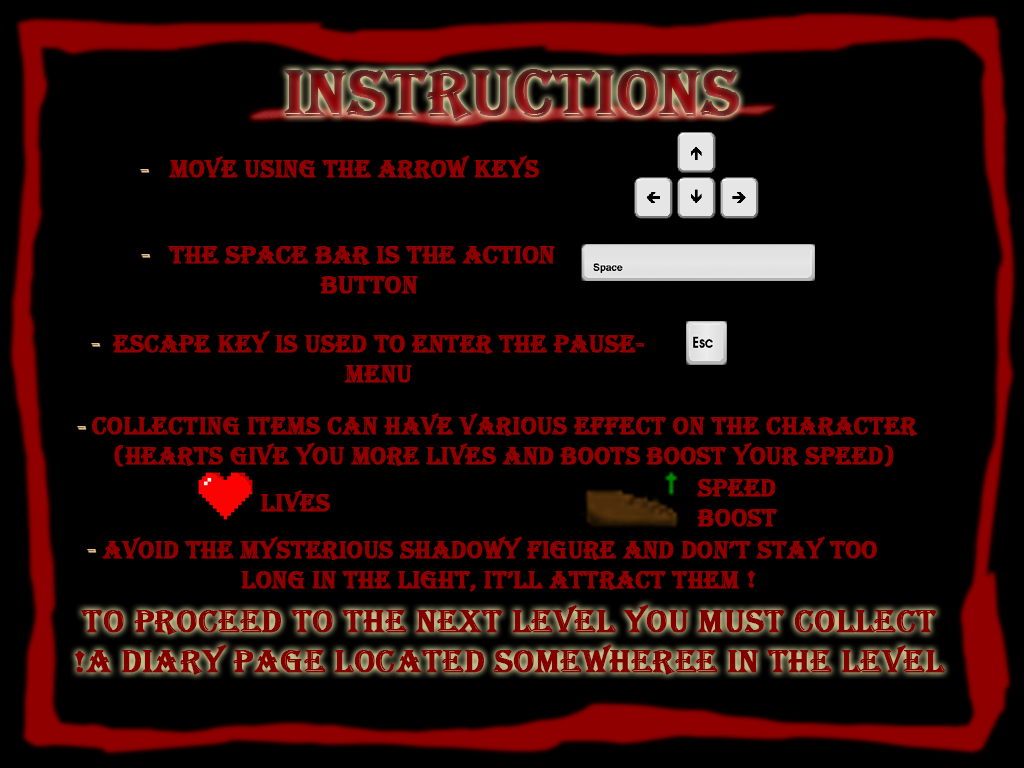
<style>
.page{position:relative;width:1024px;height:768px;background:#000000}
.page>*{position:absolute;margin:0}
.t1{font:66.7px "Algerian";font-weight:bold}
.t2{font:25px "Algerian";color:#900000;font-weight:bold}
.t3{font:25px "Algerian";color:#e3bf8e;font-weight:bold}
.t4{font:33.3px "Algerian";color:#830000;font-weight:bold}
</style>
<div class="page">
<p class="t1" style="left:284px;top:69px;width:456px;height:52px">INSTRUCTIONS</p>
<p class="t2" style="left:169px;top:155px;width:370px;height:24px">Move Using the arrow keys</p>
<p class="t3" style="left:140px;top:169px;width:10px;height:4px">-</p>
<p class="t2" style="left:168px;top:246px;width:387px;height:48px;text-align:center">the space bar is the action button</p>
<p class="t3" style="left:141px;top:254px;width:10px;height:4px">-</p>
<p class="t2" style="left:113px;top:330px;width:532px;height:53px;text-align:center">Escape key is used to enter the pausemenu</p>
<p class="t3" style="left:91px;top:343px;width:10px;height:4px">-</p>
<p class="t2" style="left:92px;top:413px;width:826px;height:54px;text-align:center">COLLECTING ITEMS CAN HAVE VARIOUS EFFECT ON THE CHARACTER<br>(Hearts give you more lives and boots boost your speed)</p>
<p class="t3" style="left:77px;top:426px;width:10px;height:4px">-</p>
<p class="t2" style="left:697px;top:479px;width:81px;height:48px;text-align:right">Speed Boost</p>
<p class="t2" style="left:261px;top:490px;width:69px;height:22px">Lives</p>
<p class="t2" style="left:102px;top:536px;width:775px;height:56px;text-align:center">AVOID THE MYSTERIOUS SHADOWY FIGURE and don’t stay too long in the light, it’ll attract them</p>
<p class="t3" style="left:87px;top:549px;width:10px;height:4px">-</p>
<p class="t2" style="left:747px;top:570px;width:9px;height:18px">!</p>
<p class="t4" style="left:74px;top:604px;width:871px;height:71px;text-align:center">To proceed to the next level you must collect a diary page located somewheree in the level!</p>
</div>
